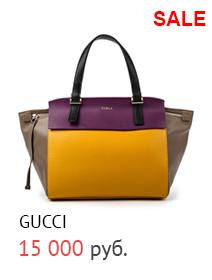
<style>
.page{position:relative;width:212px;height:280px;background:#ffffff}
.page>*{position:absolute;margin:0}
.t1{font:20px "Arial-BoldMT";color:#ff0000}
.t2{font:18px "PTSans-Regular";color:#000000}
.t3{font:22px "PTSans-Regular";color:#f14343}
.t4{font:22px "PTSans-Regular";color:#434343}
</style>
<div class="page">
<p class="t1" style="left:153px;top:11px;width:53px;height:15px">SALE</p>
<p class="t2" style="left:19px;top:215px;width:47px;height:13px">GUCCI</p>
<p class="t3" style="left:19px;top:239px;width:108px;height:21px">15 000 <span class="t4">руб.</span></p>
</div>
